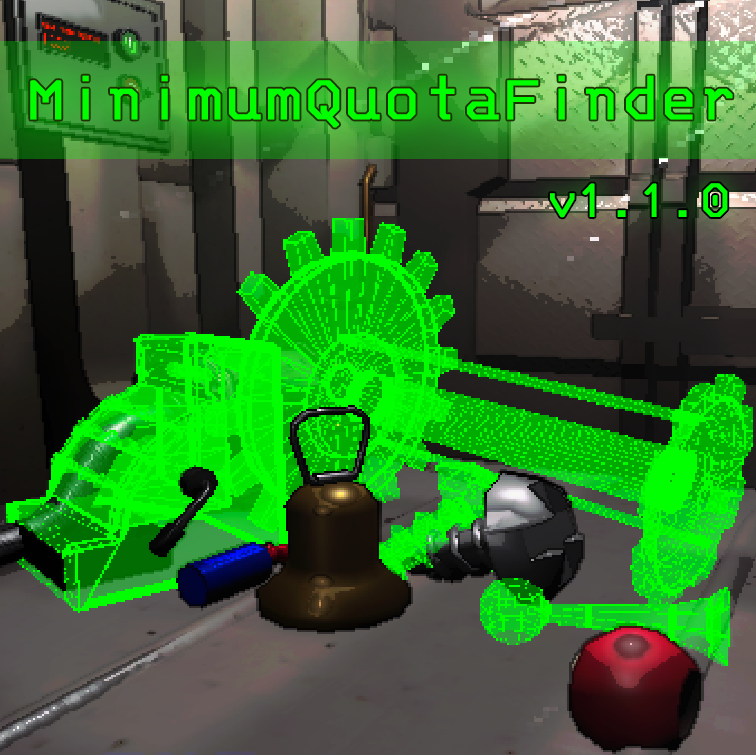
<style>
.page{position:relative;width:756px;height:755px}
.page>*{position:absolute;margin:0}
.t1{font:70px "3270-Regular";color:#01ff01;font-weight:bold}
.t2{font:54px "3270-Regular";color:#01ff01;font-weight:bold}
</style>
<div class="page">
<p class="t1" style="left:30px;top:75px;width:703px;height:53px">MinimumQuotaFinder</p>
<p class="t2" style="left:550px;top:183px;width:178px;height:35px">v1.1.0</p>
</div>
